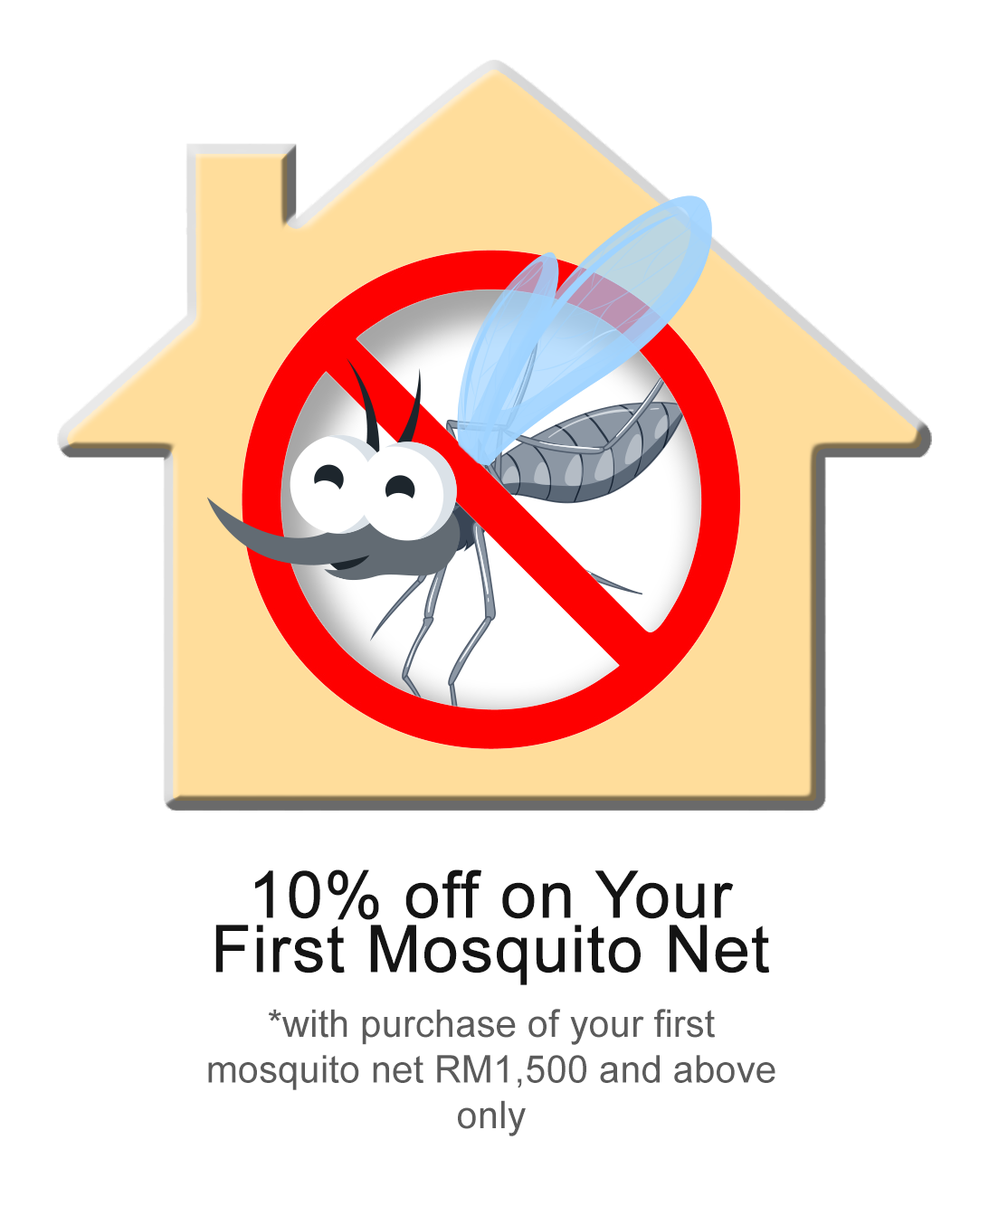
<style>
.page{position:relative;width:989px;height:1206px;background:#ffffff}
.page>*{position:absolute;margin:0}
.t1{font:38px "ArialMT";color:#5b5b5b}
.t2{font:65.1px "ArialMT";color:#141414;font-weight:bold}
.t3{font:65.1px/54.3px "ArialMT";color:#141414;font-weight:bold}
.t4{font:38px/65.1px "ArialMT";color:#5b5b5b}
</style>
<div class="page">
<p class="t1" style="left:208px;top:869px;width:567px;height:267px;text-align:center"><span class="t2">10% off on Your<br></span><span class="t3">First Mosquito Net<br></span><span class="t4">*with purchase of your first<br></span>mosquito net RM1,500 and above <br>only</p>
</div>
